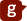
<style>
.page{position:relative;width:27px;height:21px;background:#801101}
.page>*{position:absolute;margin:0}
.t1{font:19px "Calibri";color:#ffffff;scale:1.05 1}
</style>
<div class="page">
<p class="t1" style="left:7px;top:4px;width:9px;height:13px">g</p>
</div>
